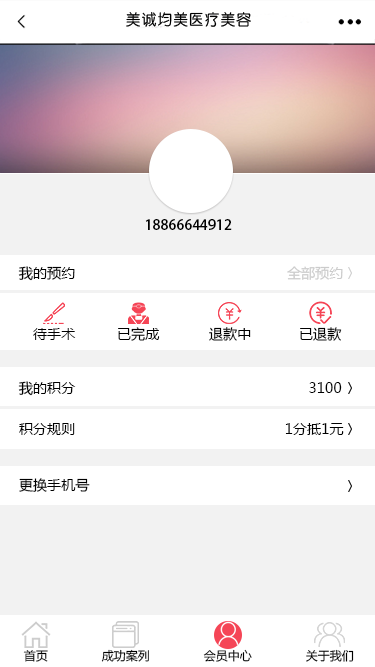
<style>
.page{position:relative;width:375px;height:667px;background:#ffffff}
.page>*{position:absolute;margin:0}
.t1{font:14px "AdobeHeitiStd-Regular";letter-spacing:0.005em;color:#000000}
.t2{font:14px "MicrosoftYaHei";letter-spacing:0.005em;color:#000000}
.t3{font:14px "MicrosoftYaHei";letter-spacing:0.005em;color:#cbcbcb}
.t4{font:12px "MicrosoftYaHei";letter-spacing:0.005em;color:#000000}
</style>
<div class="page">
<p class="t1" style="left:145px;top:219px;width:87px;height:11px">18866644912</p>
<p class="t2" style="left:18px;top:266px;width:57px;height:15px">我的预约</p>
<p class="t3" style="left:287px;top:266px;width:56px;height:14px">全部预约</p>
<p class="t2" style="left:33px;top:328px;width:43px;height:12px">待手术</p>
<p class="t2" style="left:118px;top:327px;width:42px;height:14px">已完成</p>
<p class="t2" style="left:209px;top:327px;width:42px;height:14px">退款中</p>
<p class="t2" style="left:300px;top:327px;width:42px;height:14px">已退款</p>
<p class="t2" style="left:18px;top:381px;width:58px;height:15px">我的积分</p>
<p class="t2" style="left:309px;top:382px;width:33px;height:11px">3100</p>
<p class="t2" style="left:19px;top:423px;width:56px;height:12px">积分规则</p>
<p class="t2" style="left:285px;top:423px;width:59px;height:12px">1分抵1元</p>
<p class="t2" style="left:19px;top:478px;width:71px;height:14px">更换手机号</p>
<p class="t4" style="left:23px;top:650px;width:25px;height:12px">首页</p>
<p class="t4" style="left:101px;top:649px;width:48px;height:13px">成功案列</p>
<p class="t4" style="left:203px;top:649px;width:49px;height:13px">会员中心</p>
<p class="t4" style="left:306px;top:649px;width:48px;height:13px">关于我们</p>
</div>
